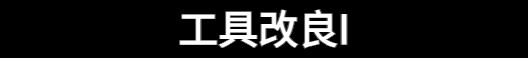
<style>
.page{position:relative;width:528px;height:58px;background:#000000}
.page>*{position:absolute;margin:0}
.t1{font:40px "WebPSD-18463539-0-Regular";color:#ffffff;font-weight:bold}
</style>
<div class="page">
<p class="t1" style="left:0px;top:0px;width:528px;height:58px">工具改良I</p>
</div>
